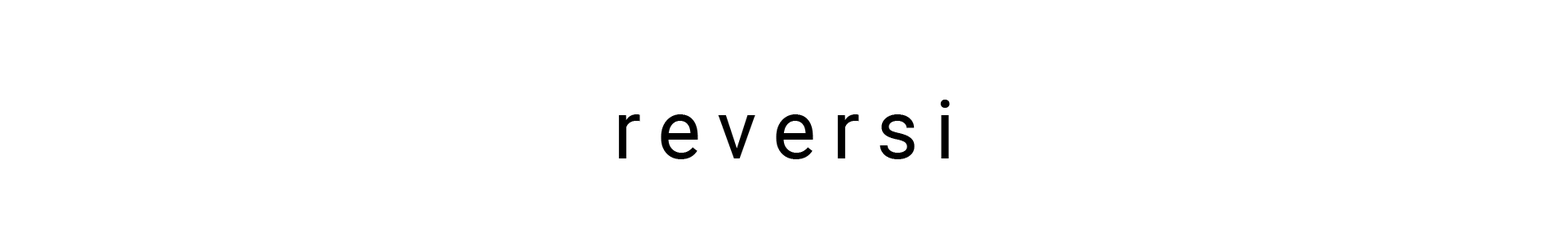
<style>
.page{position:relative;width:1568px;height:245px;background:#ffffff}
.page>*{position:absolute;margin:0}
.t1{font:81.7px "Roboto-Regular";letter-spacing:0.2em;color:#000000}
</style>
<div class="page">
<p class="t1" style="left:618px;top:100px;width:332px;height:59px">reversi</p>
</div>
